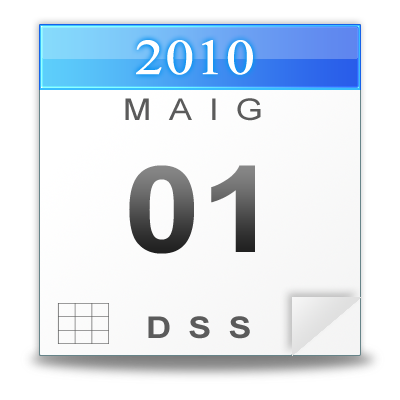
<style>
.page{position:relative;width:400px;height:400px;background:#ffffff}
.page>*{position:absolute;margin:0}
.t1{font:50px "TimesNewRomanPSMT";color:#ffffff;font-weight:bold;scale:1.15 1}
.t2{font:30px "ArialMT";letter-spacing:0.5em;color:#5b5b5b;scale:1.15 1}
.t3{font:120px "Arial-BoldMT";scale:1.15 1}
.t4{font:30px "Arial-BoldMT";letter-spacing:0.5em;color:#5b5b5b;scale:1.15 1}
</style>
<div class="page">
<p class="t1" style="left:136px;top:40px;width:117px;height:35px">2010</p>
<p class="t2" style="left:125px;top:98px;width:136px;height:23px">MAIG</p>
<p class="t3" style="left:129px;top:165px;width:126px;height:89px">01</p>
<p class="t4" style="left:148px;top:316px;width:102px;height:23px">DSS</p>
</div>
